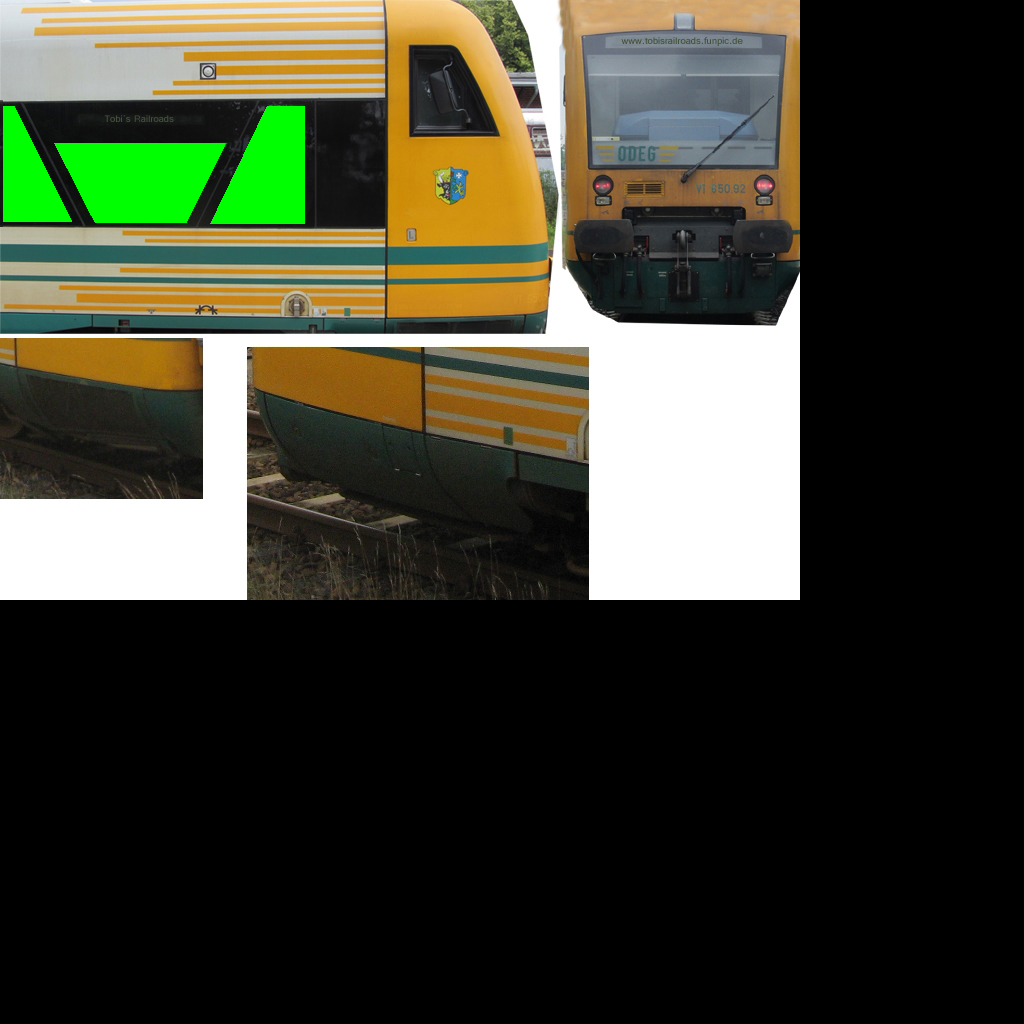
<style>
.page{position:relative;width:1024px;height:1024px;background:#000000}
.page>*{position:absolute;margin:0}
.t1{font:12px "Tunga";color:#435139}
</style>
<div class="page">
<p class="t1" style="left:621px;top:37px;width:122px;height:9px">www.tobisrailroads.funpic.de</p>
<p class="t1" style="left:104px;top:115px;width:70px;height:7px">Tobi´s Railroads</p>
</div>
